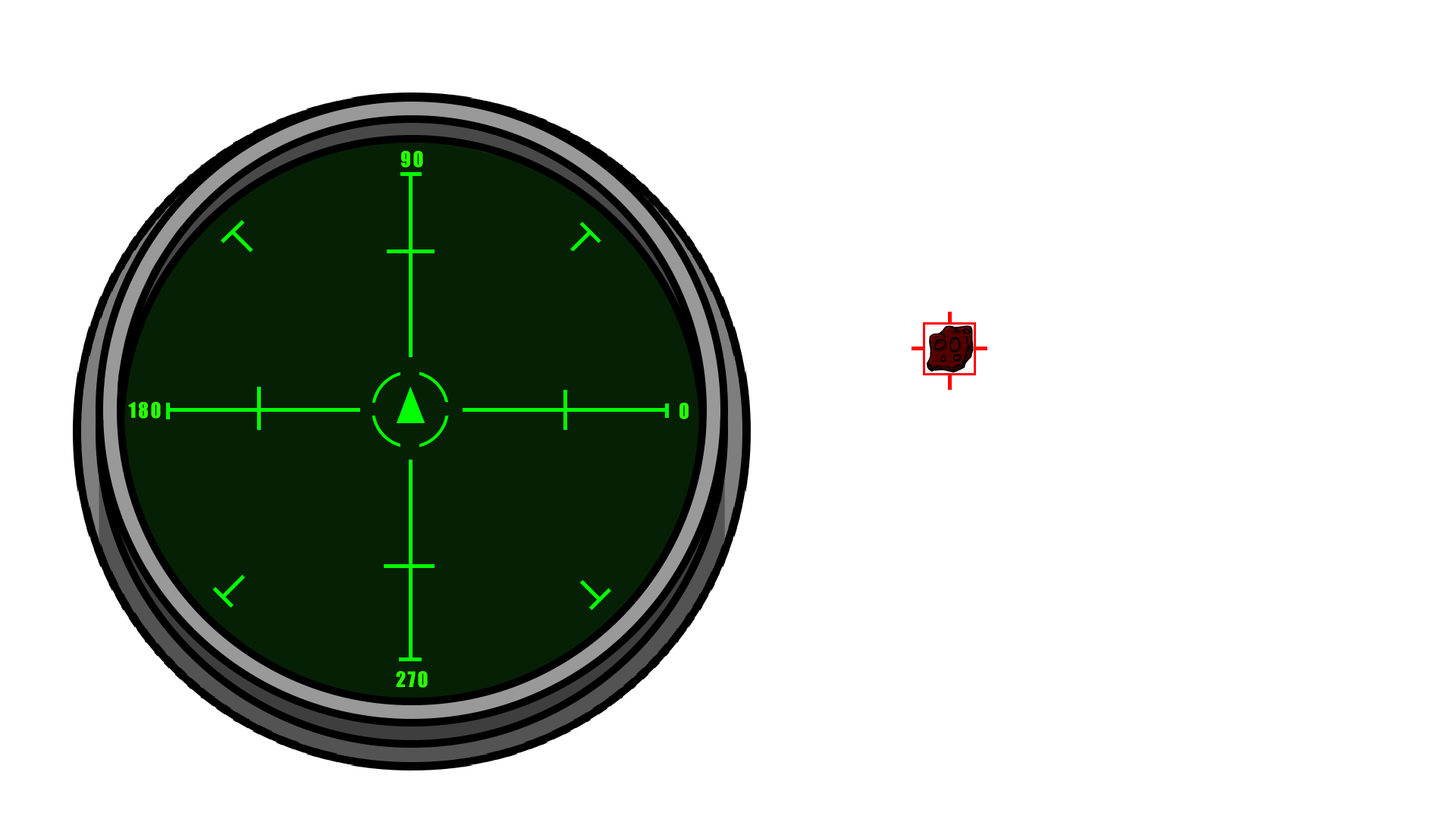
<style>
.page{position:relative;width:1456px;height:819px;background:#ffffff}
.page>*{position:absolute;margin:0}
.t1{font:19.7px "Impact";letter-spacing:0.1em;color:#2aff00;text-transform:uppercase}
</style>
<div class="page">
<p class="t1" style="left:401px;top:151px;width:22px;height:17px">90</p>
<p class="t1" style="left:128px;top:402px;width:33px;height:17px">180</p>
<p class="t1" style="left:679px;top:403px;width:10px;height:16px">0</p>
<p class="t1" style="left:396px;top:671px;width:32px;height:17px">270</p>
</div>
